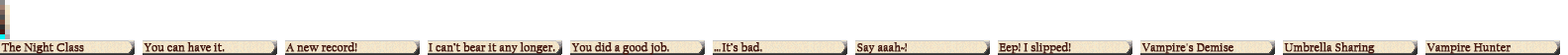
<style>
.page{position:relative;width:1568px;height:55px;background:#ffffff}
.page>*{position:absolute;margin:0}
.t1{font:11.9px "CalifornianFB-Reg";color:#481810;font-weight:bold}
.t2{font:9.5px "CalifornianFB-Reg";color:#481810;font-weight:bold;scale:1.25 1}
.t3{font:11.9px "CalifornianFB-Reg";letter-spacing:0.075em;color:#481810;font-weight:bold}
</style>
<div class="page">
<p class="t1" style="left:1px;top:43px;width:83px;height:11px">The Ni<span class="t2">g</span>ht Class</p>
<p class="t1" style="left:144px;top:43px;width:81px;height:9px">You can have it.</p>
<p class="t1" style="left:285px;top:43px;width:72px;height:9px">A new record!</p>
<p class="t1" style="left:429px;top:43px;width:126px;height:11px">I can’t bear it an<span class="t2">y </span>lon<span class="t2">g</span>er.</p>
<p class="t1" style="left:571px;top:43px;width:98px;height:12px">You did a good job.</p>
<p class="t1" style="left:714px;top:43px;width:48px;height:9px"><span class="t3">…</span>It’s bad.</p>
<p class="t1" style="left:857px;top:43px;width:50px;height:11px">Sa<span class="t2">y</span> aaah~!</p>
<p class="t1" style="left:999px;top:43px;width:72px;height:11px">Ee<span class="t2">p</span>! I sli<span class="t2">pp</span>ed!</p>
<p class="t1" style="left:1141px;top:44px;width:93px;height:10px">Vam<span class="t2">p</span>ire's Demise</p>
<p class="t1" style="left:1284px;top:43px;width:91px;height:11px">Umbrella Sharin<span class="t2">g</span></p>
<p class="t1" style="left:1426px;top:44px;width:85px;height:10px">Vam<span class="t2">p</span>ire Hunter</p>
</div>
